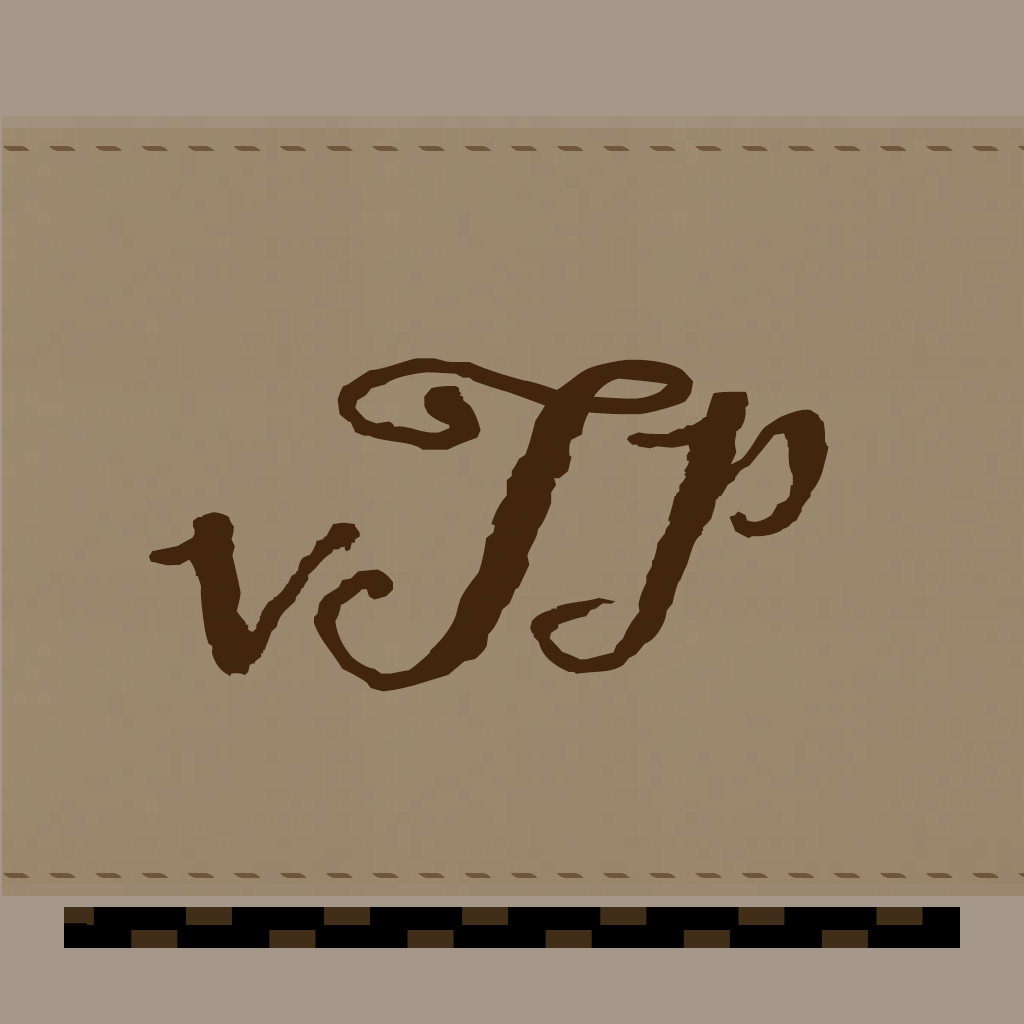
<style>
.page{position:relative;width:1024px;height:1024px;background:#a5988a}
.page>*{position:absolute;margin:0}
.t1{font:493.6px "BlackadderITC-Regular";color:#462a0f}
</style>
<div class="page">
<p class="t1" style="left:314px;top:358px;width:379px;height:334px">T</p>
<p class="t1" style="left:530px;top:391px;width:299px;height:283px">p</p>
<p class="t1" style="left:149px;top:512px;width:211px;height:165px">v</p>
</div>
